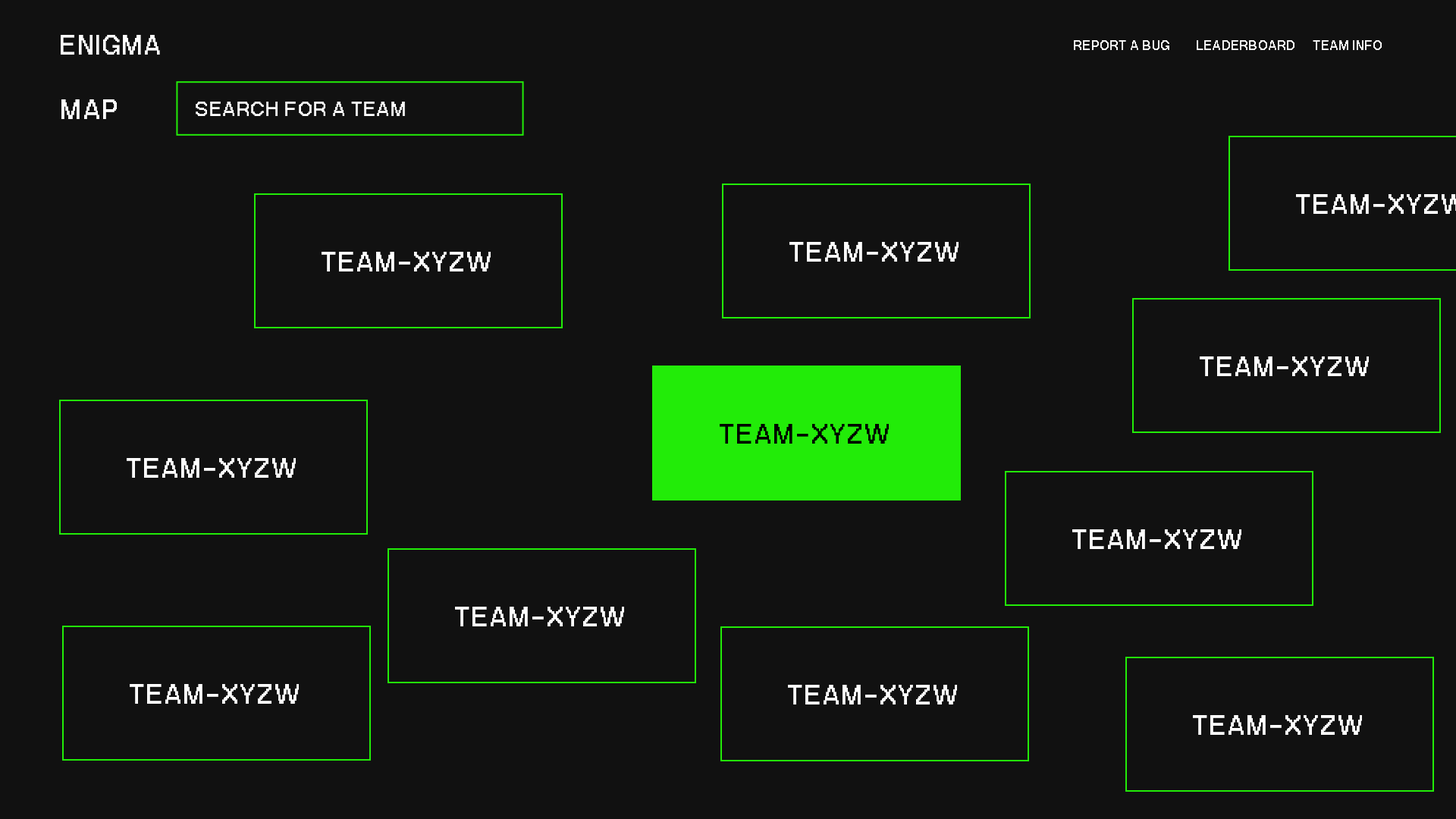
<style>
.page{position:relative;width:1456px;height:819px;background:#111111}
.page>*{position:absolute;margin:0}
.t1{font:38.4px "PPNeueBit-Bold";letter-spacing:0.03em;color:#ffffff}
.t2{font:18.7px "PPNeueBit-Bold";letter-spacing:0.03em;color:#ffffff}
.t3{font:39.2px "PPNeueBit-Bold";letter-spacing:0.03em;color:#ffffff}
.t4{font:28.6px "PPNeueBit-Bold";letter-spacing:0.03em;color:#ffffff}
.t5{font:39.2px "PPNeueBit-Bold";letter-spacing:0.03em;color:#000000}
</style>
<div class="page">
<p class="t1" style="left:61px;top:35px;width:99px;height:20px">ENIGMA</p>
<p class="t2" style="left:1074px;top:40px;width:95px;height:10px">REPORT A BUG</p>
<p class="t2" style="left:1197px;top:40px;width:97px;height:10px">LEADERBOARD</p>
<p class="t2" style="left:1313px;top:40px;width:69px;height:10px">TEAM INFO</p>
<p class="t3" style="left:61px;top:99px;width:56px;height:20px">MAP</p>
<p class="t4" style="left:196px;top:102px;width:209px;height:14px">SEARCH FOR A TEAM</p>
<p class="t3" style="left:789px;top:242px;width:170px;height:20px">TEAM-XYZW</p>
<p class="t3" style="left:322px;top:252px;width:169px;height:19px">TEAM-XYZW</p>
<p class="t3" style="left:1200px;top:356px;width:169px;height:20px">TEAM-XYZW</p>
<p class="t5" style="left:720px;top:424px;width:169px;height:20px">TEAM-XYZW</p>
<p class="t3" style="left:127px;top:458px;width:169px;height:20px">TEAM-XYZW</p>
<p class="t3" style="left:1072px;top:529px;width:169px;height:20px">TEAM-XYZW</p>
<p class="t3" style="left:455px;top:607px;width:169px;height:19px">TEAM-XYZW</p>
<p class="t3" style="left:130px;top:684px;width:169px;height:20px">TEAM-XYZW</p>
<p class="t3" style="left:788px;top:685px;width:169px;height:19px">TEAM-XYZW</p>
<p class="t3" style="left:1193px;top:715px;width:169px;height:20px">TEAM-XYZW</p>
</div>
